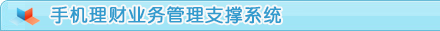
<style>
.page{position:relative;width:440px;height:31px}
.page>*{position:absolute;margin:0}
.t1{font:18px "¾­µäÖÐÔ²¼ò-regular";letter-spacing:0.05em;color:#339acd;font-weight:bold}
</style>
<div class="page">
<p class="t1" style="left:50px;top:6px;width:231px;height:18px">手机理财业务管理支撑系统</p>
</div>
